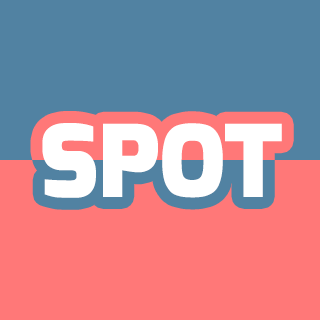
<style>
.page{position:relative;width:320px;height:320px;background:#ff7878}
.page>*{position:absolute;margin:0}
.t1{font:100px "Exo-Black";color:#ffffff;text-transform:uppercase}
</style>
<div class="page">
<p class="t1" style="left:42px;top:123px;width:240px;height:75px">Spot</p>
<p class="t1" style="left:42px;top:123px;width:240px;height:75px">Spot</p>
</div>
